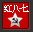
<style>
.page{position:relative;width:33px;height:32px;background:#c50000}
.page>*{position:absolute;margin:0}
.t1{font:10.4px "SimSun";letter-spacing:-0.25em;color:#ffffff}
</style>
<div class="page">
<p class="t1" style="left:4px;top:4px;width:25px;height:9px">红八七</p>
</div>
